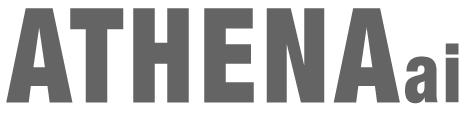
<style>
.page{position:relative;width:465px;height:113px;background:#ffffff}
.page>*{position:absolute;margin:0}
.t1{font:131.6px "HelveticaNeue-CondensedBlack";letter-spacing:0.05em;color:#646464;scale:0.86 1}
.t2{font:82.3px "HelveticaNeue-CondensedBlack";letter-spacing:0.05em;color:#646464;scale:0.86 1}
</style>
<div class="page">
<p class="t1" style="left:6px;top:8px;width:453px;height:96px">ATHENA<span class="t2">ai</span></p>
</div>
